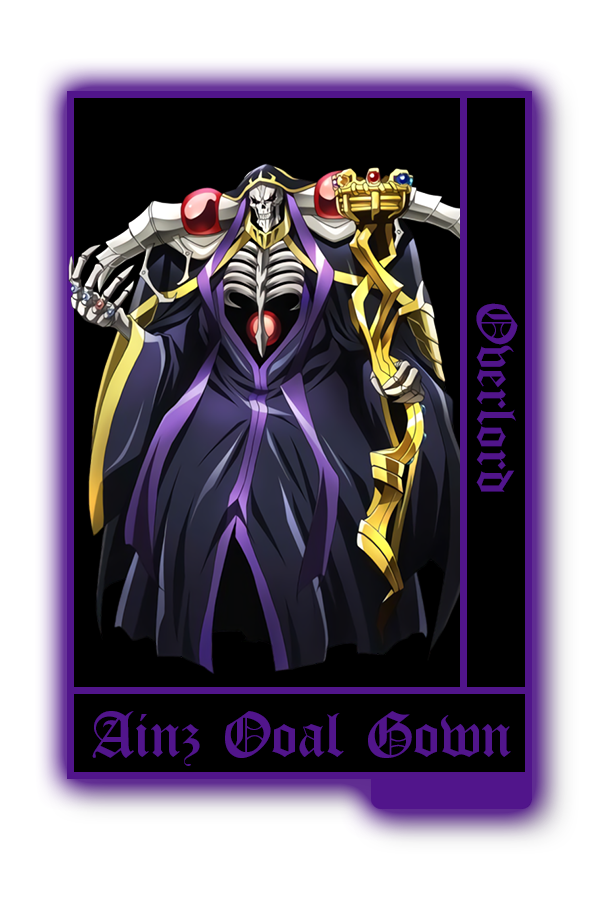
<style>
.page{position:relative;width:600px;height:900px;background:#000000}
.page>*{position:absolute;margin:0}
.t1{font:61.5px "OldLondon";color:#51158b}
.t2{font:70.1px "OldLondon";color:#51158b}
</style>
<div class="page">
<p class="t1" style="left:476px;top:303px;width:42px;height:189px;rotate:90deg">Overlord</p>
<p class="t2" style="left:92px;top:711px;width:419px;height:55px">Ainz Ooal Gown</p>
</div>
